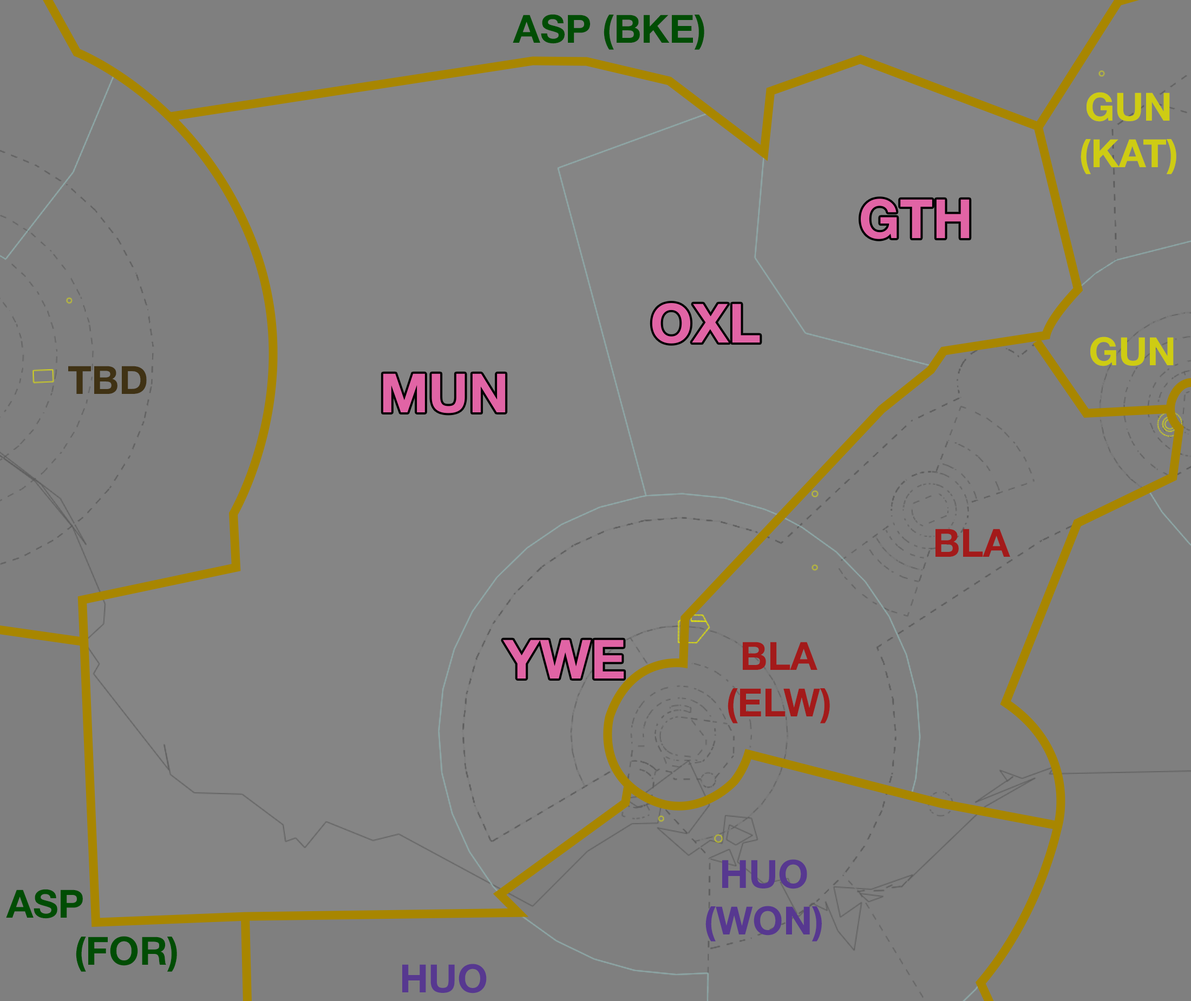
<style>
.page{position:relative;width:1191px;height:1001px;background:#7f7f7f}
.page>*{position:absolute;margin:0}
.t1{font:39px "HelveticaNeue-Bold";color:#004d04}
.t2{font:39px "HelveticaNeue-Bold";color:#cecc13}
.t3{font:54.1px "HelveticaNeue-Bold";color:#e164a5}
.t4{font:39px "HelveticaNeue-Bold";color:#403214}
.t5{font:39px "HelveticaNeue-Bold";color:#a31a1a}
.t6{font:39px "HelveticaNeue-Bold";color:#573890}
</style>
<div class="page">
<p class="t1" style="left:513px;top:14px;width:191px;height:36px">ASP (BKE)</p>
<p class="t2" style="left:1080px;top:92px;width:96px;height:82px;text-align:center">GUN<br>(KAT)</p>
<p class="t3" style="left:861px;top:199px;width:108px;height:40px">GTH</p>
<p class="t3" style="left:652px;top:303px;width:108px;height:41px">OXL</p>
<p class="t2" style="left:1090px;top:337px;width:83px;height:29px">GUN</p>
<p class="t4" style="left:68px;top:366px;width:79px;height:28px">TBD</p>
<p class="t3" style="left:383px;top:373px;width:123px;height:41px">MUN</p>
<p class="t5" style="left:935px;top:529px;width:75px;height:28px">BLA</p>
<p class="t3" style="left:503px;top:640px;width:121px;height:39px">YWE</p>
<p class="t5" style="left:727px;top:642px;width:103px;height:82px;text-align:center">BLA<br>(ELW)</p>
<p class="t6" style="left:705px;top:860px;width:117px;height:82px;text-align:center">HUO<br>(WON)</p>
<p class="t1" style="left:6px;top:889px;width:171px;height:83px;text-align:center">ASP<br>               (FOR)</p>
<p class="t6" style="left:402px;top:964px;width:85px;height:30px">HUO</p>
</div>
